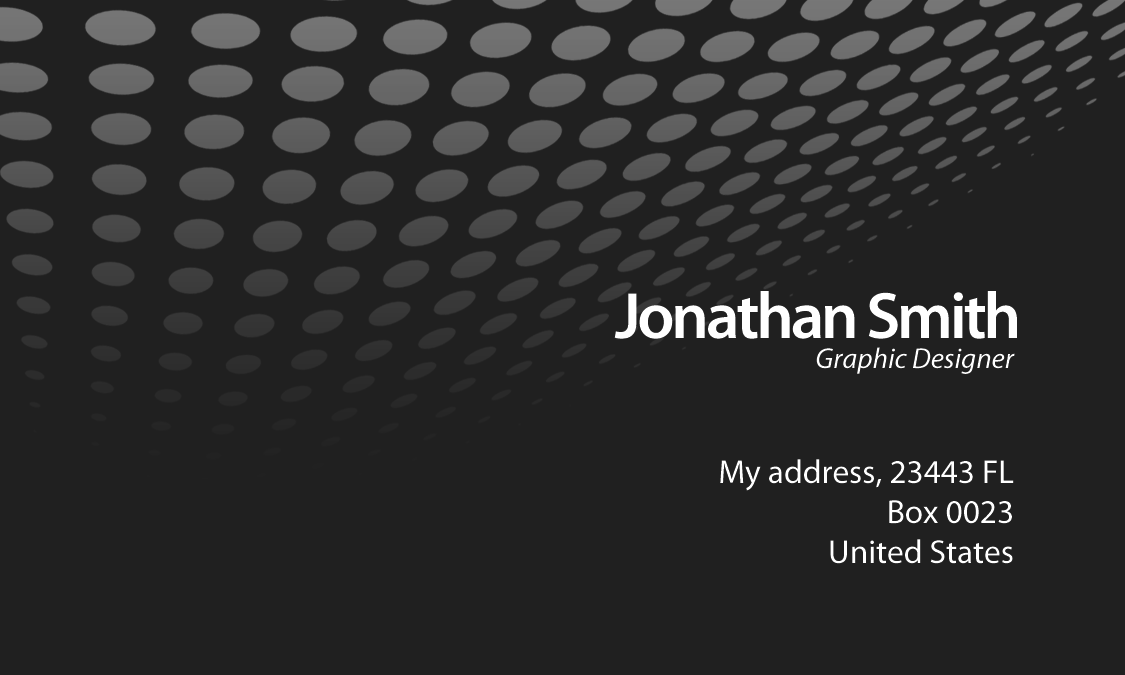
<style>
.page{position:relative;width:1125px;height:675px;background:#202020}
.page>*{position:absolute;margin:0}
.t1{font:66.2px "MyriadPro-Semibold";letter-spacing:-0.05em;color:#ffffff}
.t2{font:28.8px "MyriadPro-It";color:#ffffff}
.t3{font:33.3px "MyriadPro-Regular";color:#ffffff}
</style>
<div class="page">
<p class="t1" style="left:614px;top:291px;width:403px;height:48px">Jonathan Smith</p>
<p class="t2" style="left:816px;top:347px;width:199px;height:27px">Graphic Designer</p>
<p class="t3" style="left:720px;top:459px;width:294px;height:105px;text-align:right">My address, 23443 FL<br>Box 0023<br>United States</p>
</div>
